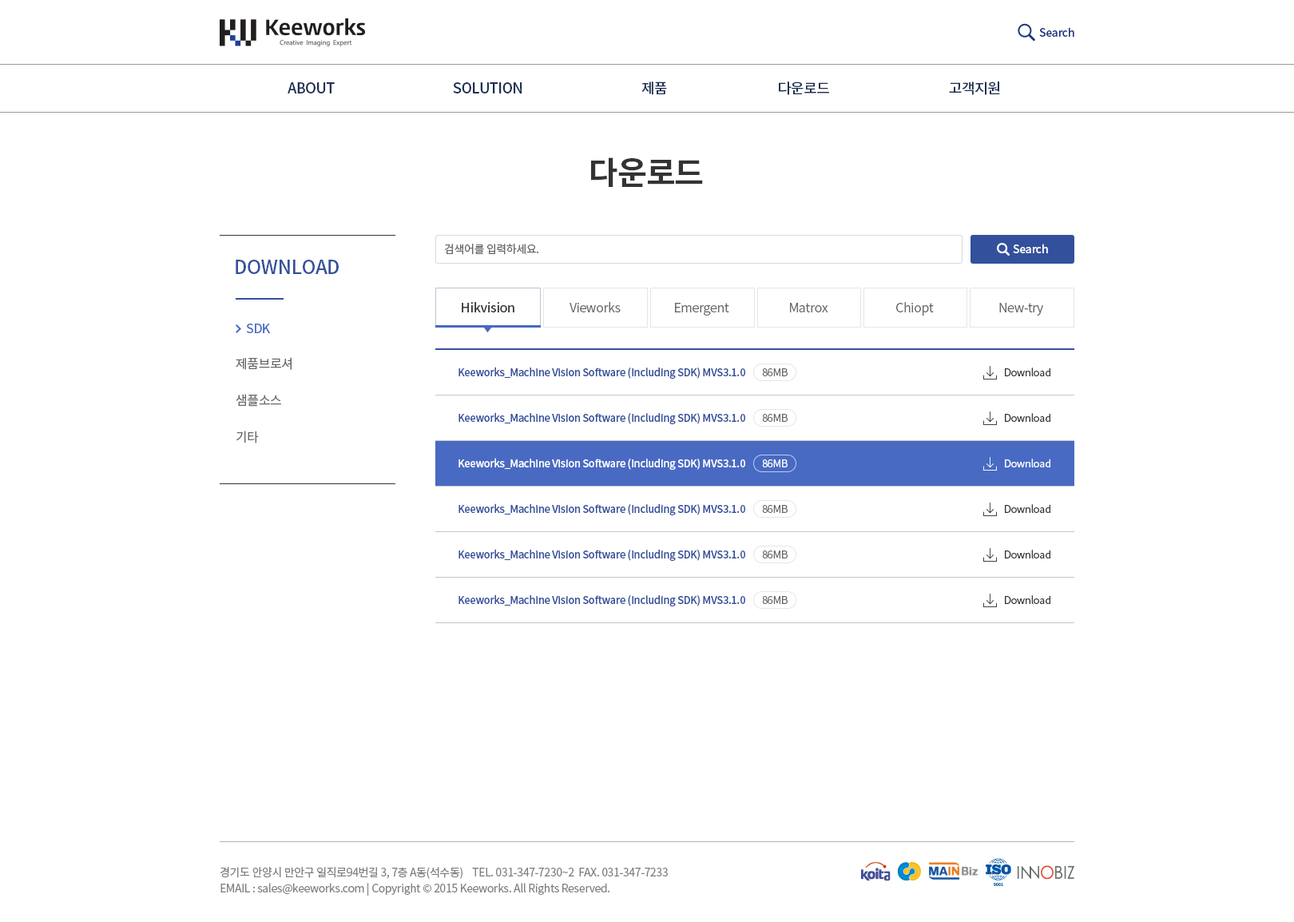
<style>
.page{position:relative;width:1294px;height:922px;background:#ffffff}
.page>*{position:absolute;margin:0}
.t1{font:11.2px "NotoSansCJKkr-Medium";letter-spacing:-0.025em;color:#1b3780}
.t2{font:14.4px "NotoSansCJKkr-Medium";letter-spacing:-0.025em;color:#1c3053;text-transform:uppercase}
.t3{font:31.9px "NotoSansCJKkr-Bold";letter-spacing:-0.025em;color:#333333}
.t4{font:11.2px "NotoSansCJKkr-Regular";letter-spacing:-0.025em;color:#666666}
.t5{font:11.2px "NotoSansCJKkr-Medium";letter-spacing:-0.025em;color:#ffffff}
.t6{font:19.2px "NotoSansCJKkr-Medium";letter-spacing:-0.025em;color:#33509c;text-transform:uppercase}
.t7{font:12.8px "NotoSansCJKkr-Medium";letter-spacing:-0.025em;color:#333333}
.t8{font:12.8px "NotoSansCJKkr-DemiLight";letter-spacing:-0.025em;color:#666666}
.t9{font:12.8px "NotoSansCJKkr-Medium";letter-spacing:-0.025em;color:#486ac2}
.t10{font:12.8px "NotoSansCJKkr-Regular";letter-spacing:-0.025em;color:#666666}
.t11{font:10.4px "NotoSansCJKkr-Medium";letter-spacing:-0.025em;color:#33509c}
.t12{font:10.4px "NotoSansCJKkr-DemiLight";letter-spacing:-0.025em;color:#666666}
.t13{font:10.4px "NotoSansCJKkr-DemiLight";letter-spacing:-0.025em;color:#333333}
.t14{font:10.4px "NotoSansCJKkr-Medium";letter-spacing:-0.025em;color:#ffffff}
.t15{font:10.4px "NotoSansCJKkr-DemiLight";letter-spacing:-0.025em;color:#ffffff}
.t16{font:11.2px/16px "NotoSansCJKkr-Regular";letter-spacing:-0.025em;color:#808080}
</style>
<div class="page">
<p class="t1" style="left:1039px;top:27px;width:35px;height:10px">Search</p>
<p class="t2" style="left:288px;top:82px;width:47px;height:11px">ABOUT</p>
<p class="t2" style="left:453px;top:82px;width:69px;height:11px">SOLUTION</p>
<p class="t2" style="left:641px;top:81px;width:26px;height:14px">제품</p>
<p class="t2" style="left:779px;top:81px;width:50px;height:14px">다운로드</p>
<p class="t2" style="left:949px;top:81px;width:51px;height:14px">고객지원</p>
<p class="t3" style="left:591px;top:157px;width:112px;height:30px">다운로드</p>
<p class="t4" style="left:445px;top:244px;width:94px;height:11px">검색어를 입력하세요.</p>
<p class="t5" style="left:1013px;top:244px;width:35px;height:9px">Search</p>
<p class="t6" style="left:236px;top:260px;width:103px;height:14px">Download</p>
<p class="t7" style="left:462px;top:302px;width:52px;height:10px">Hikvision</p>
<p class="t8" style="left:569px;top:301px;width:52px;height:11px">Vieworks</p>
<p class="t8" style="left:675px;top:303px;width:54px;height:12px">Emergent</p>
<p class="t8" style="left:790px;top:303px;width:38px;height:9px">Matrox</p>
<p class="t8" style="left:896px;top:302px;width:38px;height:13px">Chiopt</p>
<p class="t8" style="left:999px;top:303px;width:44px;height:12px">New-try</p>
<p class="t9" style="left:246px;top:323px;width:25px;height:10px">SDK</p>
<p class="t10" style="left:236px;top:357px;width:56px;height:13px">제품브로셔</p>
<p class="t11" style="left:458px;top:367px;width:287px;height:12px">Keeworks_Machine Vision Software (Including SDK) MVS3.1.0</p>
<p class="t12" style="left:762px;top:368px;width:25px;height:8px">86MB</p>
<p class="t13" style="left:1005px;top:367px;width:45px;height:9px">Download</p>
<p class="t10" style="left:236px;top:394px;width:45px;height:13px">샘플소스</p>
<p class="t11" style="left:458px;top:412px;width:287px;height:12px">Keeworks_Machine Vision Software (Including SDK) MVS3.1.0</p>
<p class="t12" style="left:762px;top:414px;width:25px;height:8px">86MB</p>
<p class="t13" style="left:1005px;top:413px;width:45px;height:9px">Download</p>
<p class="t10" style="left:236px;top:430px;width:23px;height:13px">기타</p>
<p class="t14" style="left:458px;top:458px;width:287px;height:12px">Keeworks_Machine Vision Software (Including SDK) MVS3.1.0</p>
<p class="t15" style="left:762px;top:459px;width:25px;height:8px">86MB</p>
<p class="t15" style="left:1005px;top:458px;width:45px;height:9px">Download</p>
<p class="t11" style="left:458px;top:503px;width:287px;height:12px">Keeworks_Machine Vision Software (Including SDK) MVS3.1.0</p>
<p class="t12" style="left:762px;top:505px;width:25px;height:8px">86MB</p>
<p class="t13" style="left:1005px;top:504px;width:45px;height:9px">Download</p>
<p class="t11" style="left:458px;top:549px;width:287px;height:12px">Keeworks_Machine Vision Software (Including SDK) MVS3.1.0</p>
<p class="t12" style="left:762px;top:550px;width:25px;height:8px">86MB</p>
<p class="t13" style="left:1005px;top:549px;width:45px;height:9px">Download</p>
<p class="t11" style="left:458px;top:594px;width:287px;height:12px">Keeworks_Machine Vision Software (Including SDK) MVS3.1.0</p>
<p class="t12" style="left:762px;top:596px;width:25px;height:8px">86MB</p>
<p class="t13" style="left:1005px;top:595px;width:45px;height:9px">Download</p>
<p class="t16" style="left:220px;top:867px;width:448px;height:28px">경기도 안양시 만안구 일직로94번길 3, 7층 A동(석수동)    TEL. 031-347-7230~2  FAX. 031-347-7233<br>EMAIL : sales@keeworks.com | Copyright © 2015 Keeworks. All Rights Reserved.</p>
</div>
